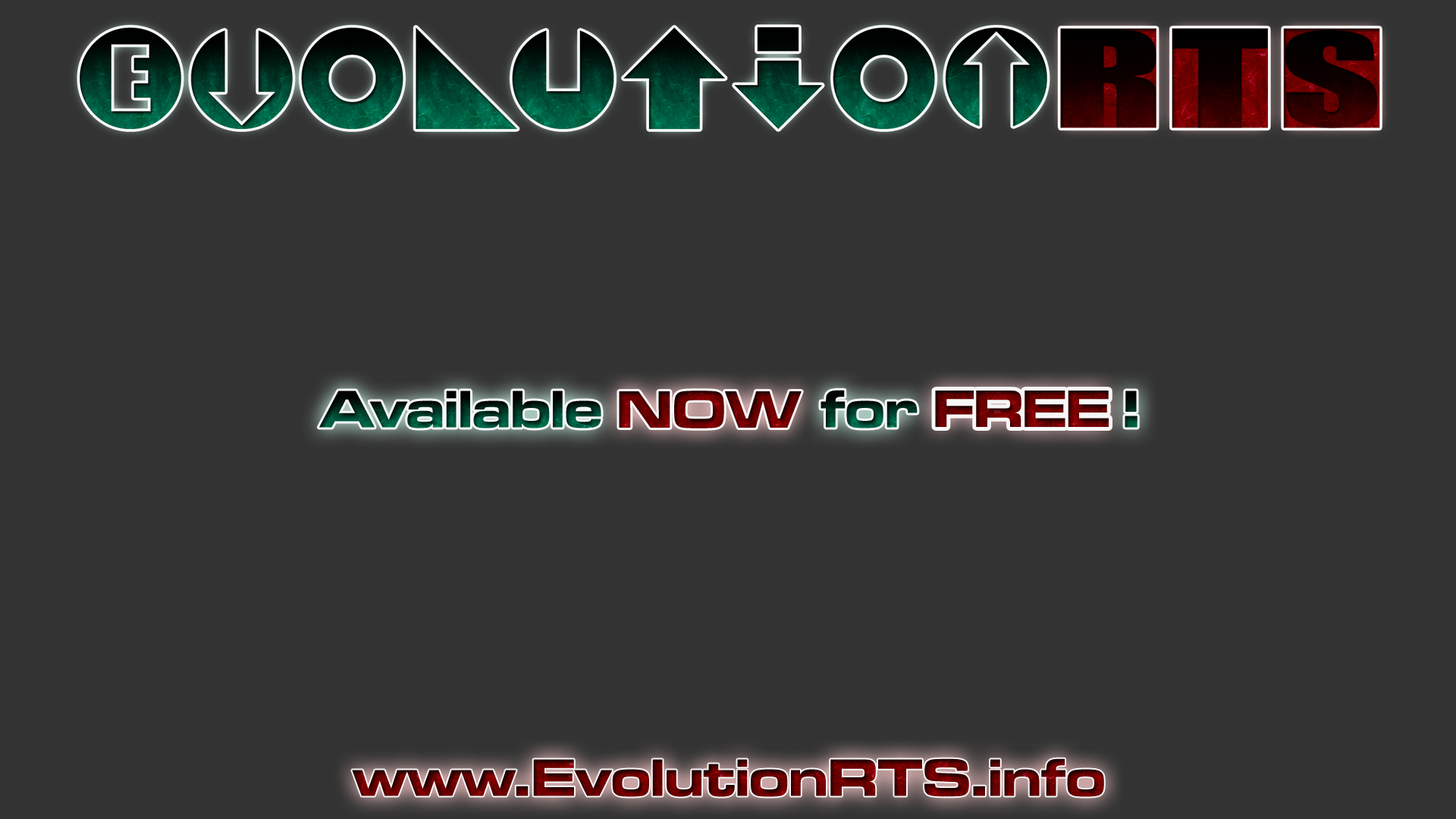
<style>
.page{position:relative;width:1456px;height:819px;background:#333333}
.page>*{position:absolute;margin:0}
.t1{font:54.6px "MicrogrammaD-BoldExte"}
</style>
<div class="page">
<p class="t1" style="left:318px;top:390px;width:819px;height:38px">Available                for               !</p>
<p class="t1" style="left:619px;top:391px;width:183px;height:37px">NOW</p>
<p class="t1" style="left:935px;top:391px;width:174px;height:36px">FREE</p>
<p class="t1" style="left:352px;top:758px;width:752px;height:39px">www.EvolutionRTS.info</p>
</div>
